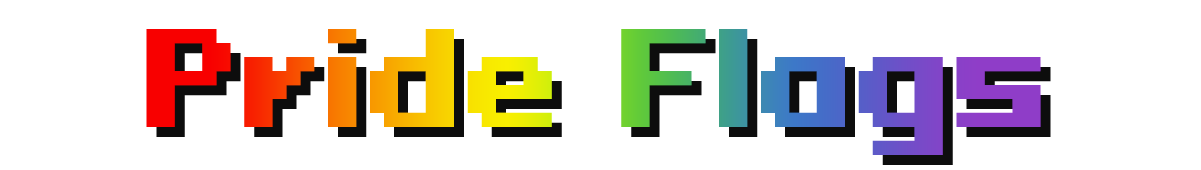
<style>
.page{position:relative;width:1201px;height:170px;background:#ffffff}
.page>*{position:absolute;margin:0}
.t1{font:125.8px "PixeloidSans-Bold"}
</style>
<div class="page">
<p class="t1" style="left:146px;top:29px;width:895px;height:126px">Pride Flags</p>
</div>
